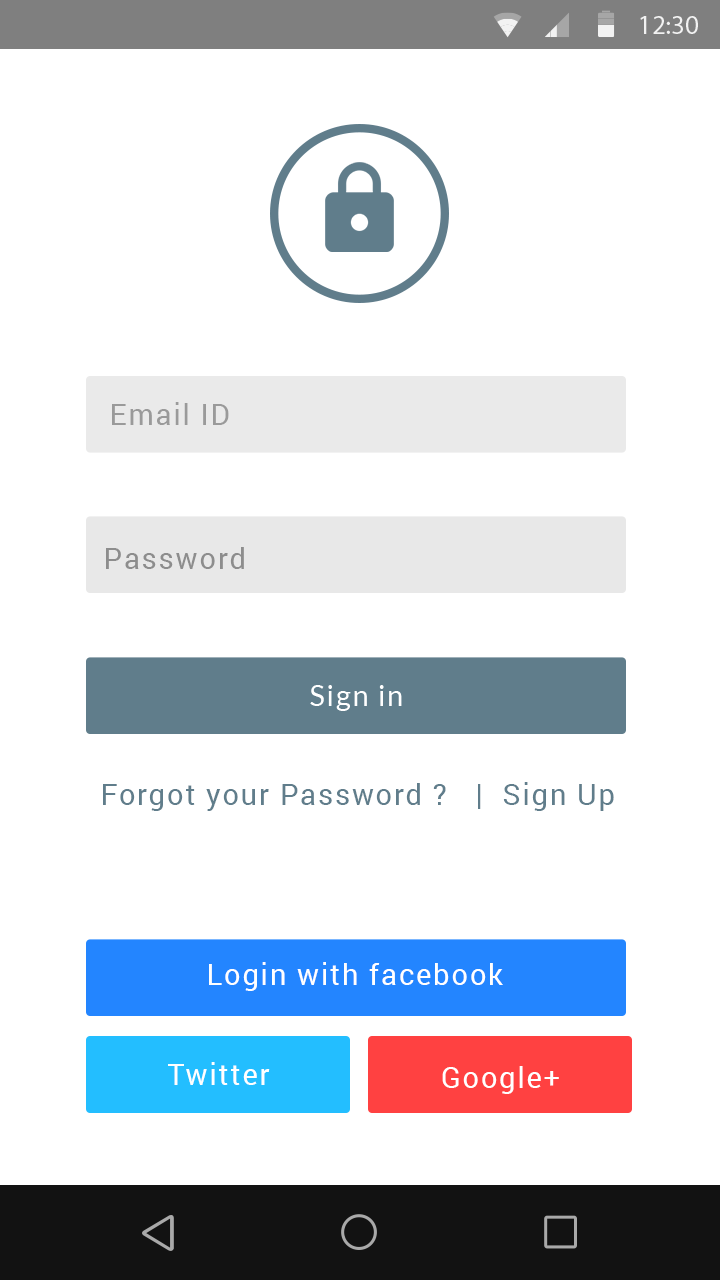
<style>
.page{position:relative;width:720px;height:1280px;background:#ffffff}
.page>*{position:absolute;margin:0}
.t1{font:29.2px "Roboto-Regular";letter-spacing:0.06em;color:#9a9a9a}
.t2{font:29.2px "Roboto-Regular";letter-spacing:0.06em;color:#8d8d8d}
.t3{font:29.2px "Lato-Regular";letter-spacing:0.06em;color:#ffffff}
.t4{font:29.2px "Roboto-Regular";letter-spacing:0.06em;color:#607d8b}
.t5{font:29.2px "Roboto-Regular";letter-spacing:0.06em;color:#ffffff}
</style>
<div class="page">
<p class="t1" style="left:112px;top:402px;width:117px;height:23px">Email ID</p>
<p class="t2" style="left:106px;top:547px;width:138px;height:22px">Password</p>
<p class="t3" style="left:310px;top:685px;width:92px;height:26px">Sign in</p>
<p class="t4" style="left:103px;top:782px;width:511px;height:29px">Forgot your Password ?   |  Sign Up</p>
<p class="t5" style="left:209px;top:962px;width:294px;height:29px">Login with facebook</p>
<p class="t5" style="left:168px;top:1062px;width:102px;height:23px">Twitter</p>
<p class="t5" style="left:442px;top:1066px;width:117px;height:28px">Google+</p>
</div>
